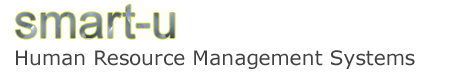
<style>
.page{position:relative;width:464px;height:77px;background:#ffffff}
.page>*{position:absolute;margin:0}
.t1{font:48px "ArialMT";letter-spacing:0.005em}
.t2{font:20px "Verdana";letter-spacing:0.005em;color:#424242}
</style>
<div class="page">
<p class="t1" style="left:15px;top:4px;width:160px;height:35px">smart-u</p>
<p class="t2" style="left:16px;top:50px;width:399px;height:19px">Human Resource Management Systems</p>
</div>
